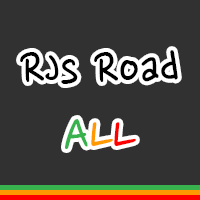
<style>
.page{position:relative;width:200px;height:200px;background:#313131}
.page>*{position:absolute;margin:0}
.t1{font:54px "NanumPen";color:#000000}
.t2{font:54px "NanumPen";color:#37b24d}
.t3{font:54px "NanumPen";color:#ff9900}
.t4{font:54px "NanumPen";color:#ff0000}
</style>
<div class="page">
<p class="t1" style="left:20px;top:50px;width:158px;height:34px">RJs Road</p>
<p class="t2" style="left:65px;top:119px;width:71px;height:30px">A<span class="t3">L</span><span class="t4">L</span></p>
</div>
